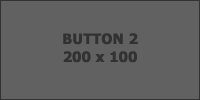
<style>
.page{position:relative;width:200px;height:100px;background:#616161}
.page>*{position:absolute;margin:0}
.t1{font:14px/18px "Tahoma-Bold";letter-spacing:0.01em;color:#323232;font-weight:bold}
</style>
<div class="page">
<p class="t1" style="left:63px;top:33px;width:75px;height:30px;text-align:center">BUTTON 2<br>200 x 100</p>
</div>
